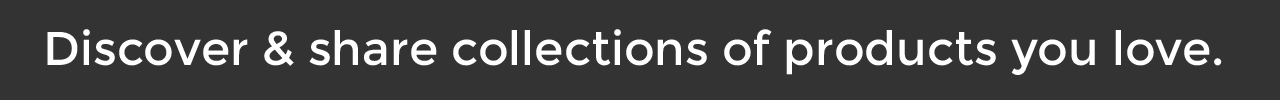
<style>
.page{position:relative;width:1280px;height:100px;background:#333333}
.page>*{position:absolute;margin:0}
.t1{font:47.3px "Montserrat-Regular";color:#ffffff}
</style>
<div class="page">
<p class="t1" style="left:47px;top:29px;width:1175px;height:46px">Discover &amp; share collections of products you love.</p>
</div>
